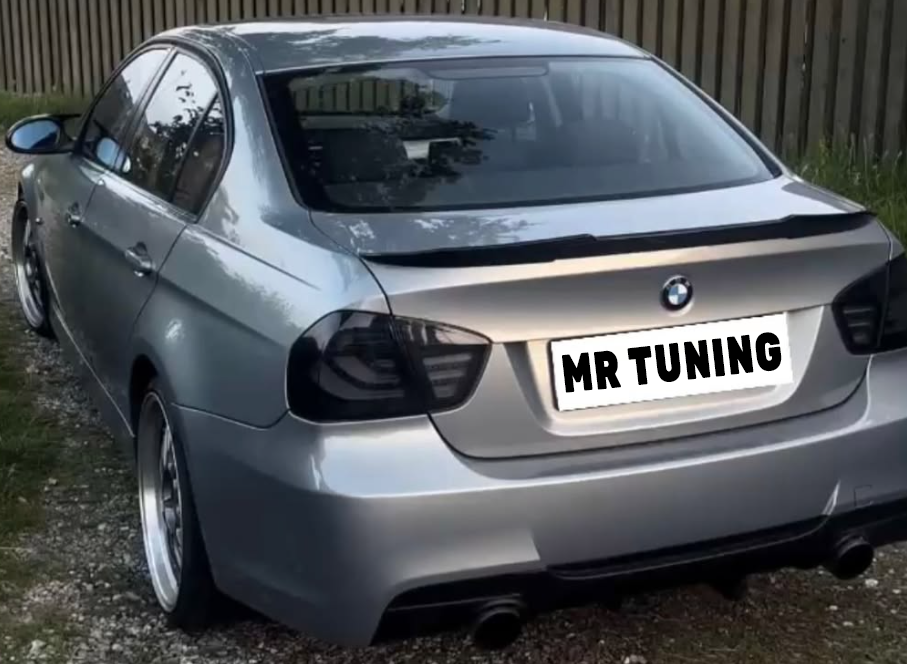
<style>
.page{position:relative;width:907px;height:664px}
.page>*{position:absolute;margin:0}
.t1{font:54px "Rubik-Black";letter-spacing:0.05em;color:#000000;scale:0.67 1}
</style>
<div class="page">
<p class="t1" style="left:562px;top:332px;width:220px;height:61px;rotate:-6deg">MR TUNING</p>
</div>
